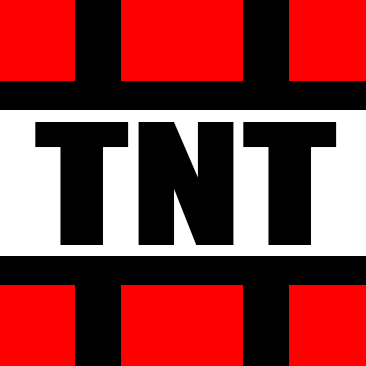
<style>
.page{position:relative;width:366px;height:366px;background:#000000}
.page>*{position:absolute;margin:0}
.t1{font:156px "Impact";color:#000000;scale:1.33 1}
</style>
<div class="page">
<p class="t1" style="left:35px;top:122px;width:302px;height:123px">TNT</p>
</div>
